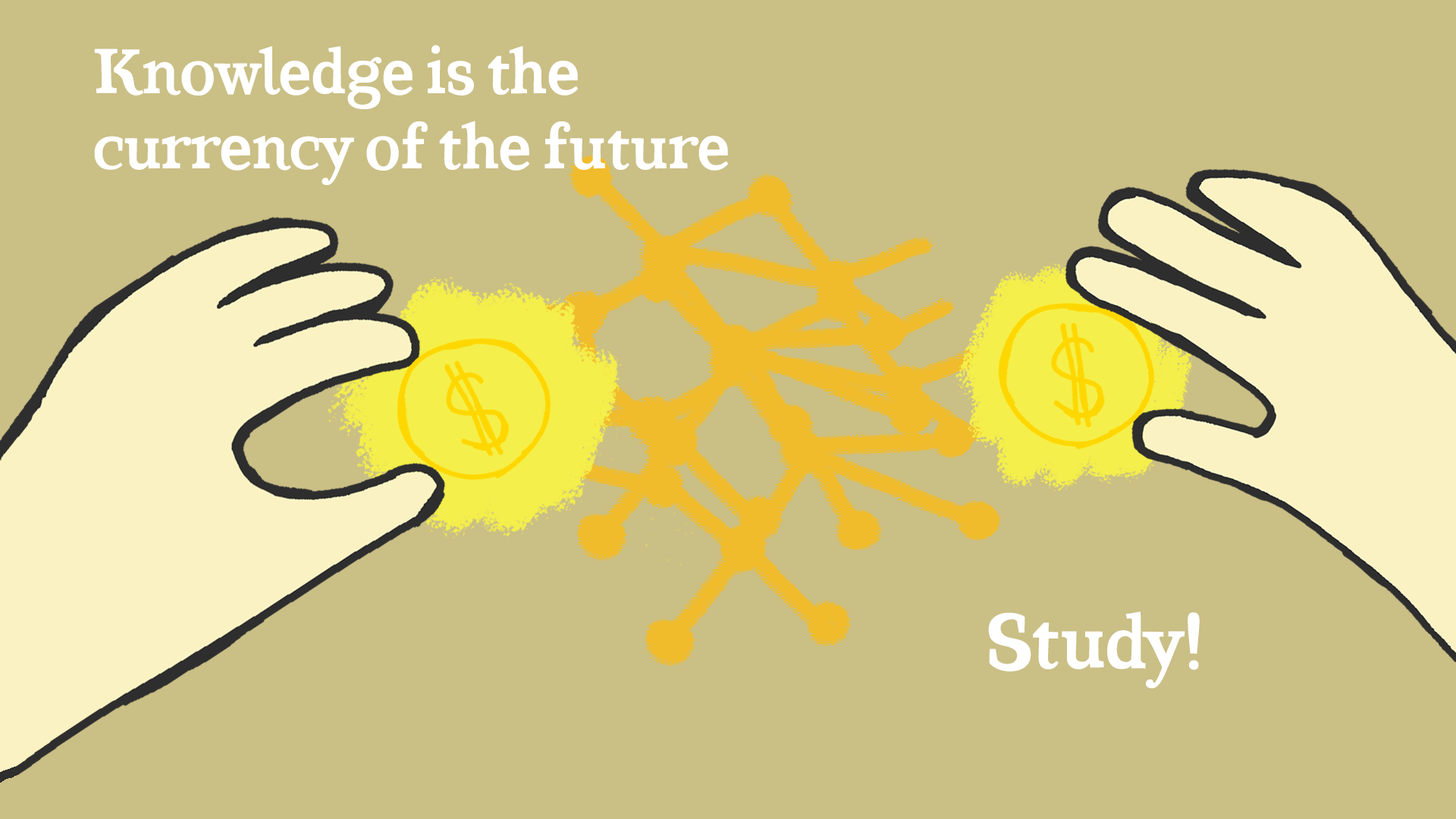
<style>
.page{position:relative;width:1456px;height:819px;background:#cabf85}
.page>*{position:absolute;margin:0}
.t1{font:62.8px "CoatsBold-Bold";color:#ffffff}
.t2{font:75.4px "CoatsBold-Bold";color:#ffffff}
</style>
<div class="page">
<p class="t1" style="left:94px;top:45px;width:635px;height:140px">Knowledge is the <br>currency of the future</p>
<p class="t2" style="left:988px;top:611px;width:212px;height:78px">Study!</p>
</div>
